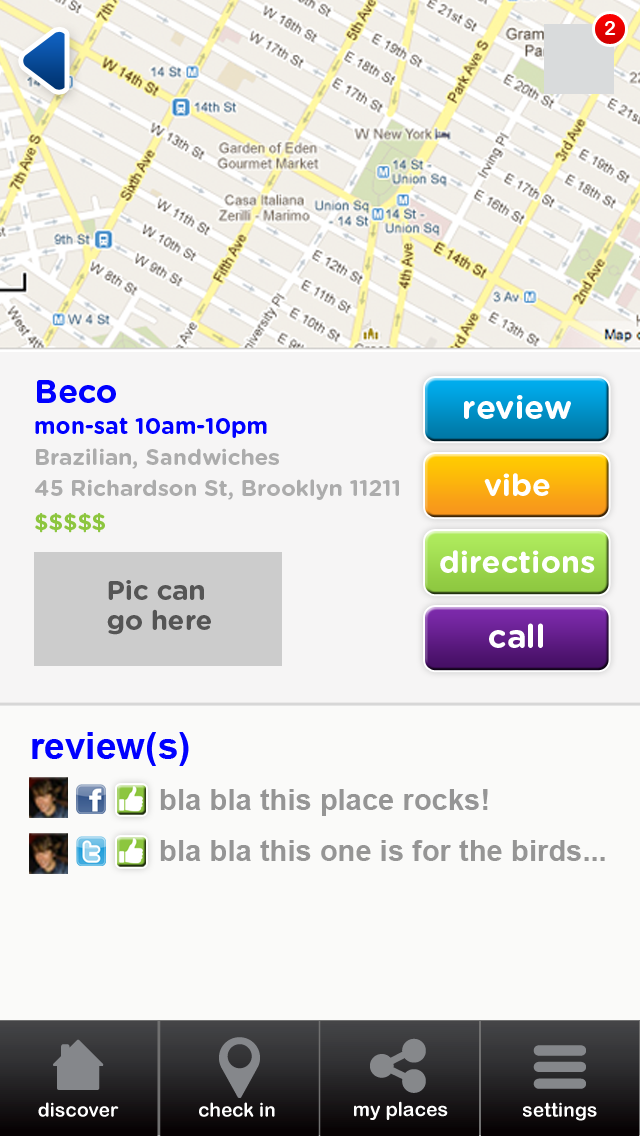
<style>
.page{position:relative;width:640px;height:1136px;background:#fafaf9}
.page>*{position:absolute;margin:0}
.t1{font:20px "ArialRoundedMTBold";color:#ffffff}
.t2{font:22.4px/31px "GothamRounded-Bold";color:#acacac}
.t3{font:32.7px/31px "GothamRounded-Bold";color:#0000ff}
.t4{font:22.7px/31px "GothamRounded-Bold";color:#0000ff}
.t5{font:22.4px/31px "GothamRounded-Bold";color:#8dc63f}
.t6{font:32.9px "GothamRounded-Bold";color:#ffffff}
.t7{font:30.9px "GothamRounded-Bold";color:#ffffff}
.t8{font:27.3px/30px "GothamRounded-Bold";color:#555555}
.t9{font:29.2px/51px "Arial-BoldMT";color:#959595}
.t10{font:37.2px/36px "Arial-BoldMT";color:#0000ff}
</style>
<div class="page">
<p class="t1" style="left:605px;top:21px;width:11px;height:14px">2</p>
<p class="t2" style="left:35px;top:380px;width:364px;height:153px"><span class="t3">Beco                           <br></span><span class="t4">mon-sat 10am-10pm<br></span>Brazilian, Sandwiches<br>45 Richardson St, Brooklyn 11211<br><span class="t5">$$$$$</span></p>
<p class="t6" style="left:464px;top:395px;width:107px;height:24px">review</p>
<p class="t7" style="left:484px;top:473px;width:66px;height:23px">vibe</p>
<p class="t7" style="left:440px;top:550px;width:155px;height:23px">directions</p>
<p class="t8" style="left:107px;top:580px;width:104px;height:55px">Pic can <br>go here</p>
<p class="t6" style="left:489px;top:623px;width:54px;height:25px">call</p>
<p class="t9" style="left:32px;top:732px;width:573px;height:129px"><span class="t10">review(s)<br> </span>               bla bla this place rocks!<br>                bla bla this one is for the birds...</p>
</div>
